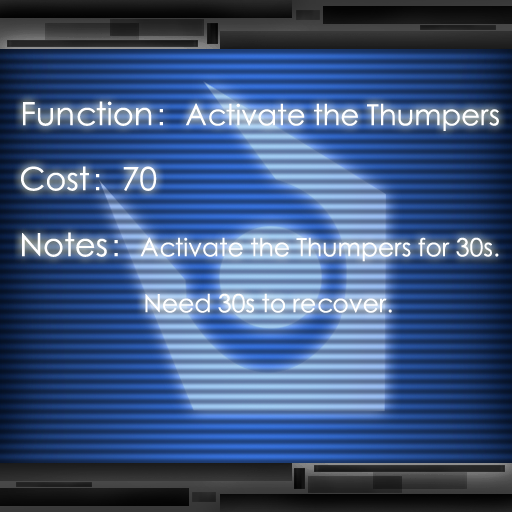
<style>
.page{position:relative;width:512px;height:512px}
.page>*{position:absolute;margin:0}
.t1{font:29px "STXihei";color:#ffffff}
.t2{font:32px "STXihei";color:#ffffff}
.t3{font:25px "STXihei";color:#ffffff}
</style>
<div class="page">
<p class="t1" style="left:23px;top:101px;width:476px;height:30px"><span class="t2">Function：</span>Activate the Thumpers</p>
<p class="t2" style="left:21px;top:166px;width:136px;height:25px">Cost：70</p>
<p class="t3" style="left:22px;top:232px;width:477px;height:81px"><span class="t2">Notes：</span>Activate the Thumpers for 30s.<br>     Need 30s to recover.</p>
</div>
